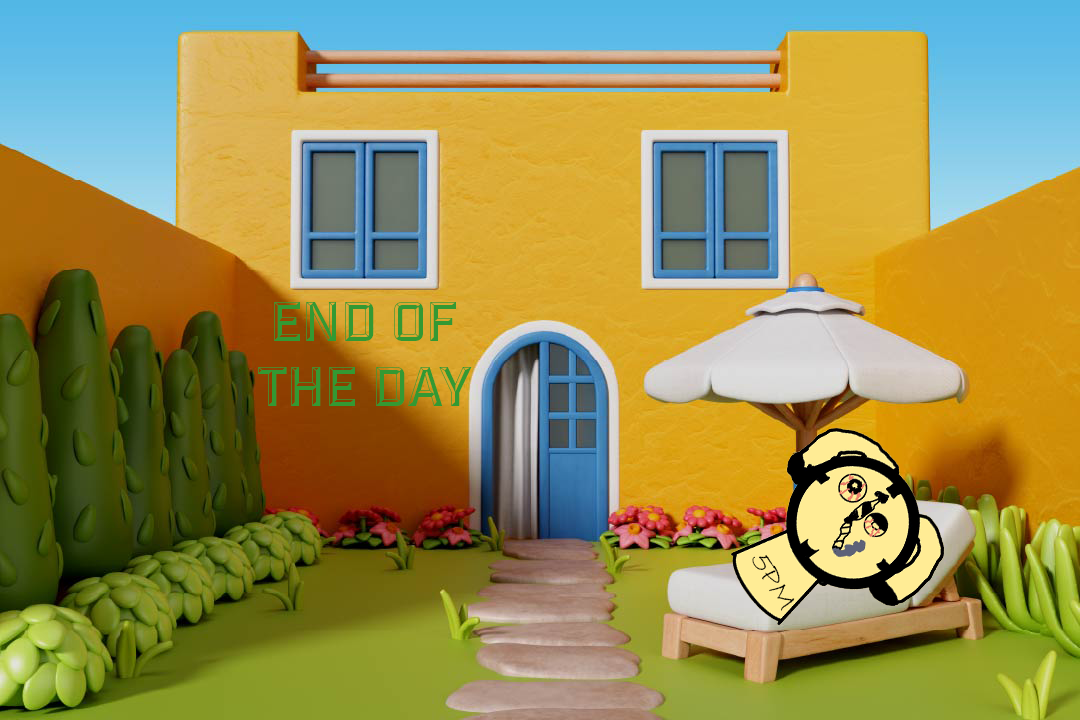
<style>
.page{position:relative;width:1080px;height:720px}
.page>*{position:absolute;margin:0}
.t1{font:54.3px "IndustryInc-Bevel";color:#339933}
.t2{font:31px "BradleyHandITC";color:#000000}
</style>
<div class="page">
<p class="t1" style="left:258px;top:302px;width:214px;height:104px;text-align:center">End of the day</p>
<p class="t2" style="left:752px;top:555px;width:43px;height:56px;rotate:59deg">5PM</p>
</div>
